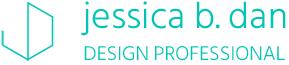
<style>
.page{position:relative;width:289px;height:65px;background:#ffffff}
.page>*{position:absolute;margin:0}
.t1{font:20.2px/31.1px "HindSiliguri-Light";color:#00c5b4}
.t2{font:37.4px "HindSiliguri-Light";color:#00c5b4}
</style>
<div class="page">
<p class="t1" style="left:81px;top:1px;width:205px;height:60px"><span class="t2">jessica b. dan<br></span>DESIGN PROFESSIONAL</p>
</div>
